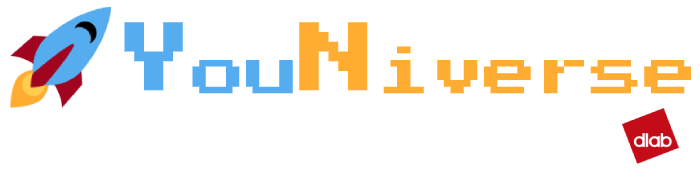
<style>
.page{position:relative;width:700px;height:169px;background:#ffffff}
.page>*{position:absolute;margin:0}
.t1{font:53.4px "PressStart2P-Regular";color:#ffac33}
.t2{font:77.7px "PressStart2P-Regular";color:#55acee}
.t3{font:53.4px "PressStart2P-Regular";color:#55acee}
.t4{font:77.7px "PressStart2P-Regular";color:#ffac33}
</style>
<div class="page">
<p class="t1" style="left:124px;top:22px;width:567px;height:72px"><span class="t2">Y</span><span class="t3">ou</span><span class="t4">N</span>iverse</p>
</div>
